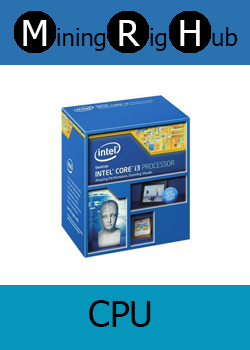
<style>
.page{position:relative;width:250px;height:350px;background:#ffffff}
.page>*{position:absolute;margin:0}
.t1{font:36px "Tahoma";color:#ffffff}
.t2{font:24px "Tahoma";color:#000000}
.t3{font:36px "Tahoma";color:#000000}
</style>
<div class="page">
<p class="t1" style="left:23px;top:20px;width:24px;height:26px">M</p>
<p class="t2" style="left:57px;top:28px;width:49px;height:23px">ining</p>
<p class="t1" style="left:119px;top:20px;width:21px;height:26px">R</p>
<p class="t2" style="left:150px;top:28px;width:17px;height:23px">ig</p>
<p class="t1" style="left:180px;top:20px;width:20px;height:26px">H</p>
<p class="t2" style="left:212px;top:27px;width:26px;height:19px">ub</p>
<p class="t3" style="left:89px;top:300px;width:62px;height:27px">CPU</p>
</div>
